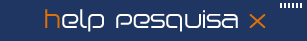
<style>
.page{position:relative;width:307px;height:41px;background:#1f3662}
.page>*{position:absolute;margin:0}
.t1{font:24px "Birdman";color:#ffffff}
.t2{font:24px "Birdman";color:#de7008}
</style>
<div class="page">
<p class="t1" style="left:45px;top:9px;width:221px;height:23px"><span class="t2">h</span>elp Pesquisa <span class="t2">x</span></p>
</div>
